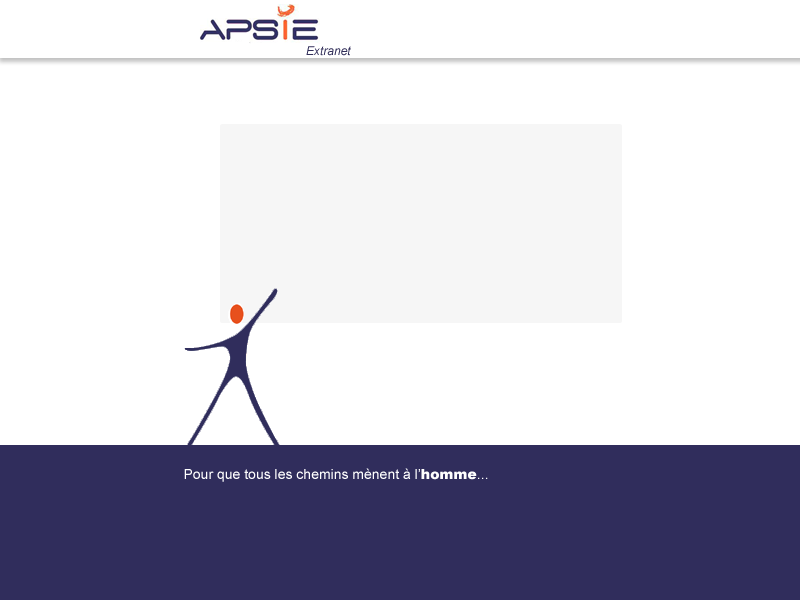
<style>
.page{position:relative;width:800px;height:600px;background:#ffffff}
.page>*{position:absolute;margin:0}
.t1{font:12px "Arial-ItalicMT";color:#322f5a}
.t2{font:14px "ArialMT";color:#ffffff}
.t3{font:14px "Arial-Black";color:#ffffff}
</style>
<div class="page">
<p class="t1" style="left:306px;top:46px;width:45px;height:10px">Extranet</p>
<p class="t2" style="left:184px;top:468px;width:304px;height:14px">Pour que tous les chemins mènent à l’<span class="t3">homme</span>...</p>
</div>
